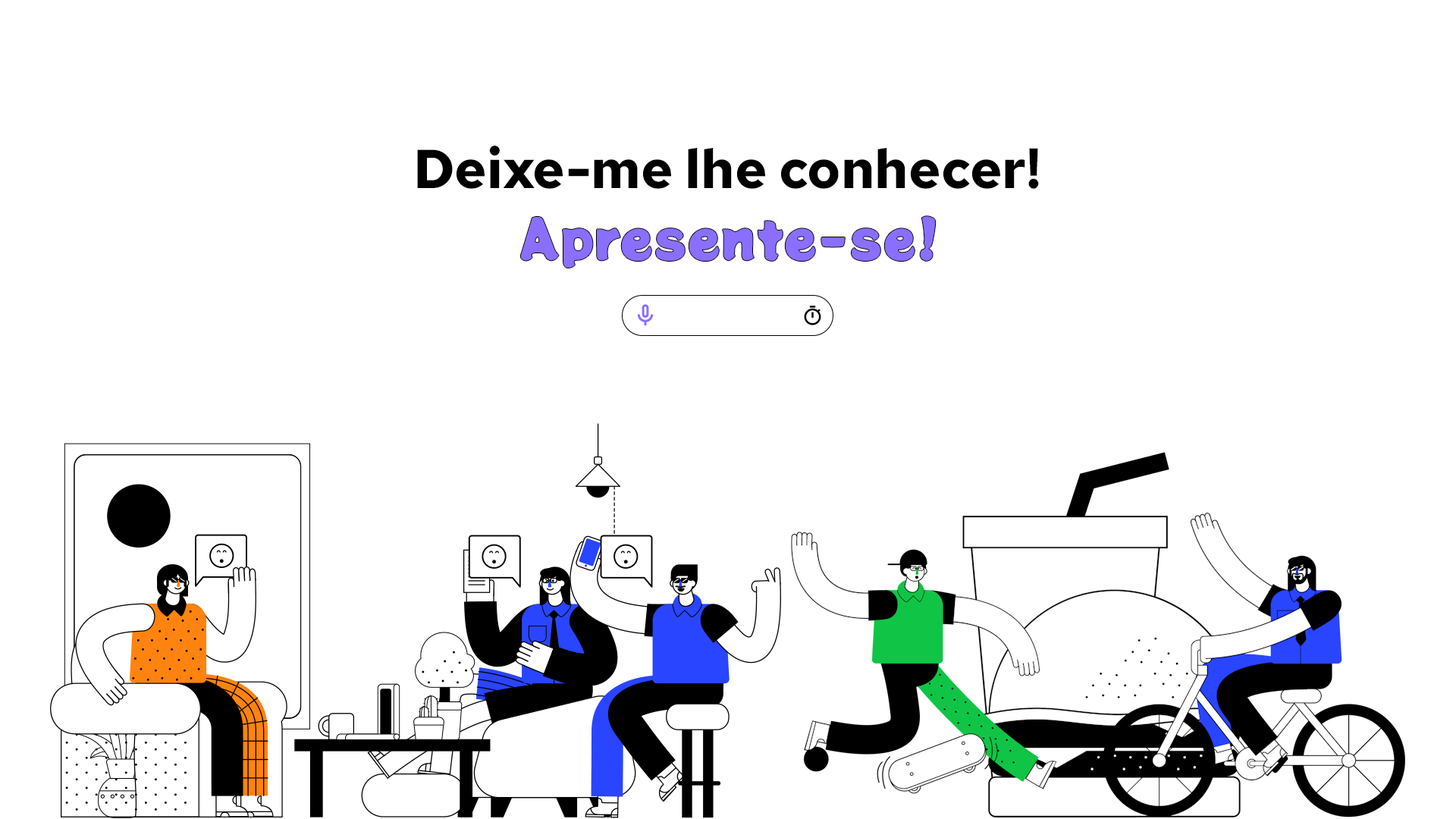
<style>
.page{position:relative;width:1456px;height:819px;background:#ffffff}
.page>*{position:absolute;margin:0}
.t1{font:54.6px "RedHatText-Bold";color:#000000}
.t2{font:54.6px "PottaOne-Regular";color:#8a6ffe}
</style>
<div class="page">
<p class="t1" style="left:417px;top:146px;width:622px;height:43px">Deixe-me lhe conhecer!</p>
<p class="t2" style="left:520px;top:216px;width:416px;height:52px">Apresente-se!</p>
</div>
